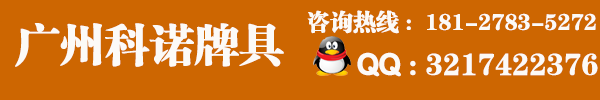
<style>
.page{position:relative;width:600px;height:100px;background:#cd6601}
.page>*{position:absolute;margin:0}
.t1{font:23px "FZCSJW--GB1-0";color:#fcfaf7}
.t2{font:44.2px "FZCSJW--GB1-0";color:#fcfaf7}
.t3{font:30.8px "FZCSJW--GB1-0";color:#fcfaf7}
.t4{font:30.8px "FZY4JW--GB1-0";color:#fcfaf7}
</style>
<div class="page">
<p class="t1" style="left:307px;top:10px;width:289px;height:24px">咨询热线 :  181-2783-5272</p>
<p class="t2" style="left:15px;top:23px;width:269px;height:44px">广州科诺牌具</p>
<p class="t3" style="left:357px;top:52px;width:241px;height:25px"><span class="t4"> QQ </span>: 3217422376</p>
</div>
